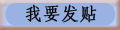
<style>
.page{position:relative;width:120px;height:30px;background:#99b2e1}
.page>*{position:absolute;margin:0}
.t1{font:18px "FangSong_GB2312";color:#080605;font-weight:bold}
</style>
<div class="page">
<p class="t1" style="left:25px;top:4px;width:72px;height:19px">我要发贴</p>
</div>
